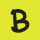
<style>
.page{position:relative;width:40px;height:40px;background:#e2e832}
.page>*{position:absolute;margin:0}
.t1{font:31.5px "AxureHandwriting-Bold";color:#212121;scale:0.95 1}
</style>
<div class="page">
<p class="t1" style="left:10px;top:9px;width:20px;height:24px">B</p>
</div>
